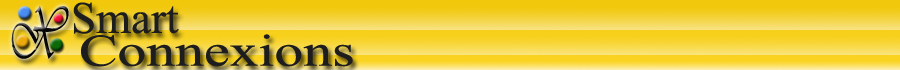
<style>
.page{position:relative;width:900px;height:70px}
.page>*{position:absolute;margin:0}
.t1{font:75.2px "Vivaldii";color:#090908;scale:0.58 1}
.t2{font:45px "TimesNewRomanPSMT";color:#1e1d1d}
.t3{font:45px "TimesNewRomanPSMT";color:#1e1d1d;scale:1.28 1}
</style>
<div class="page">
<p class="t1" style="left:11px;top:5px;width:58px;height:54px">X</p>
<p class="t2" style="left:73px;top:2px;width:106px;height:32px">Smart</p>
<p class="t3" style="left:81px;top:34px;width:272px;height:33px">Connexions</p>
</div>
